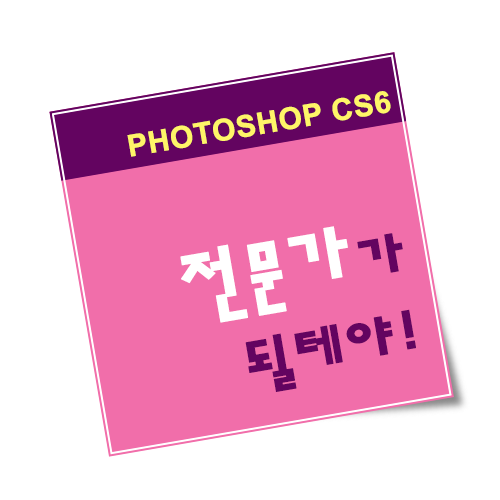
<style>
.page{position:relative;width:500px;height:500px;background:#ffffff}
.page>*{position:absolute;margin:0}
.t1{font:30px "Arial-BoldMT";color:#fff568;font-weight:bold}
.t2{font:60px/80px "ahn2006-B";color:#630460;font-weight:bold;scale:1.2 1}
.t3{font:80px/80px "ahn2006-B";color:#ffffff;font-weight:bold;scale:1.2 1}
</style>
<div class="page">
<p class="t1" style="left:127px;top:91px;width:264px;height:66px;rotate:-10deg">PHOTOSHOP CS6</p>
<p class="t2" style="left:180px;top:226px;width:236px;height:166px;text-align:right;rotate:-10deg"><span class="t3">전문가</span>가<br>될테야!</p>
</div>
